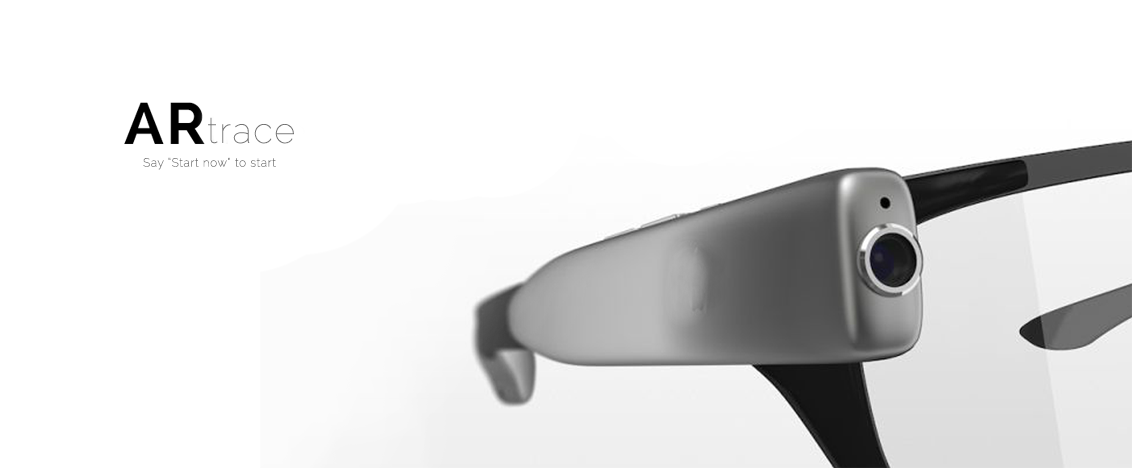
<style>
.page{position:relative;width:1132px;height:468px;background:#ffffff}
.page>*{position:absolute;margin:0}
.t1{font:36px "Raleway-Thin";letter-spacing:0.05em;color:#737373}
.t2{font:12px "Raleway-ExtraLight";letter-spacing:0.05em;color:#777777}
</style>
<div class="page">
<p class="t1" style="left:208px;top:117px;width:86px;height:27px">trace</p>
<p class="t2" style="left:143px;top:157px;width:133px;height:13px">Say “Start now” to start</p>
</div>
